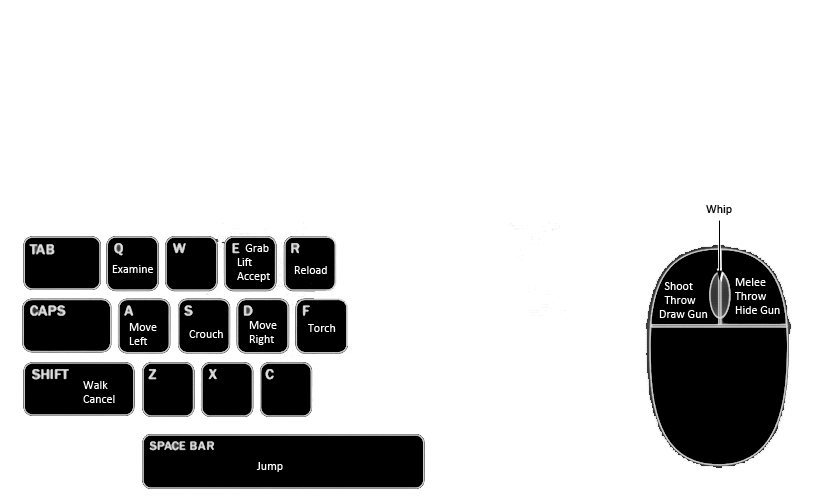
<style>
.page{position:relative;width:829px;height:500px;background:#ffffff}
.page>*{position:absolute;margin:0}
.t1{font:12px "Calibri";color:#0d0d0d}
.t2{font:12px "Calibri";color:#ffffff}
</style>
<div class="page">
<p class="t1" style="left:706px;top:205px;width:26px;height:10px">Whip</p>
<p class="t2" style="left:237px;top:244px;width:33px;height:38px">Grab<br>Lift<br>Accept</p>
<p class="t2" style="left:112px;top:265px;width:41px;height:8px">Examine</p>
<p class="t2" style="left:294px;top:266px;width:33px;height:8px">Reload</p>
<p class="t2" style="left:735px;top:278px;width:45px;height:36px">Melee<br>Throw<br>Hide Gun</p>
<p class="t2" style="left:659px;top:282px;width:49px;height:36px">Shoot<br>  Throw<br>Draw Gun</p>
<p class="t2" style="left:129px;top:323px;width:28px;height:22px">Move<br>Left</p>
<p class="t2" style="left:249px;top:321px;width:28px;height:24px">Move<br>Right</p>
<p class="t2" style="left:308px;top:324px;width:28px;height:8px">Torch</p>
<p class="t2" style="left:189px;top:330px;width:34px;height:8px">Crouch</p>
<p class="t2" style="left:83px;top:381px;width:32px;height:22px">Walk<br>Cancel</p>
<p class="t2" style="left:256px;top:462px;width:27px;height:10px">Jump</p>
</div>
